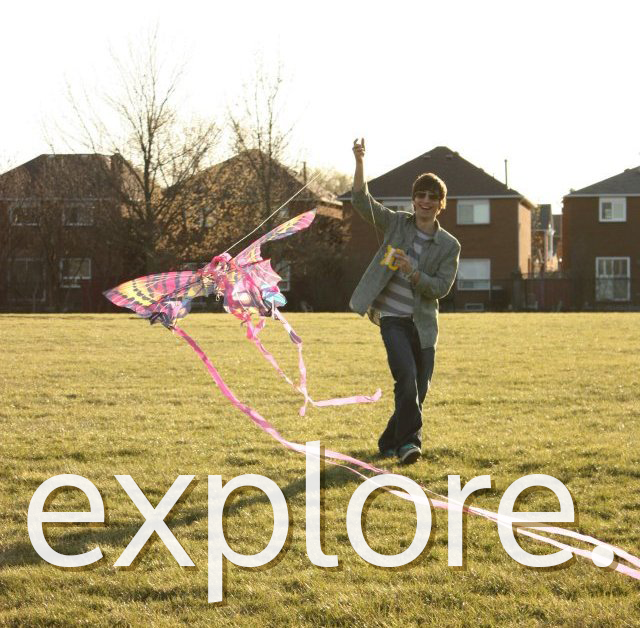
<style>
.page{position:relative;width:640px;height:628px}
.page>*{position:absolute;margin:0}
.t1{font:170px "Oxygen";color:#ffffff}
</style>
<div class="page">
<p class="t1" style="left:27px;top:440px;width:587px;height:163px">explore.</p>
</div>
